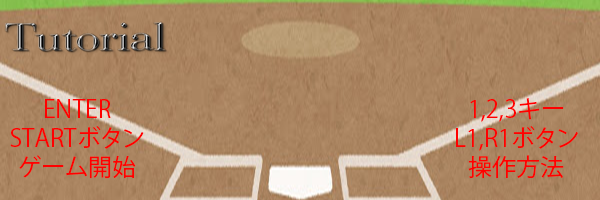
<style>
.page{position:relative;width:600px;height:200px}
.page>*{position:absolute;margin:0}
.t1{font:24px "KozGoPr6N-Regular";color:#ff0000}
</style>
<div class="page">
<p class="t1" style="left:10px;top:99px;width:134px;height:80px;text-align:center">ENTER<br>STARTボタン<br>ゲーム開始</p>
<p class="t1" style="left:456px;top:98px;width:122px;height:81px;text-align:center">1,2,3キー<br>L1,R1ボタン<br>操作方法</p>
</div>
